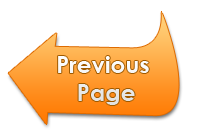
<style>
.page{position:relative;width:200px;height:138px;background:#ffffff}
.page>*{position:absolute;margin:0}
.t1{font:23.4px "CenturyGothic-Bold";color:#f7f7f7}
</style>
<div class="page">
<p class="t1" style="left:58px;top:56px;width:91px;height:49px;text-align:center">Previous <br>Page</p>
</div>
